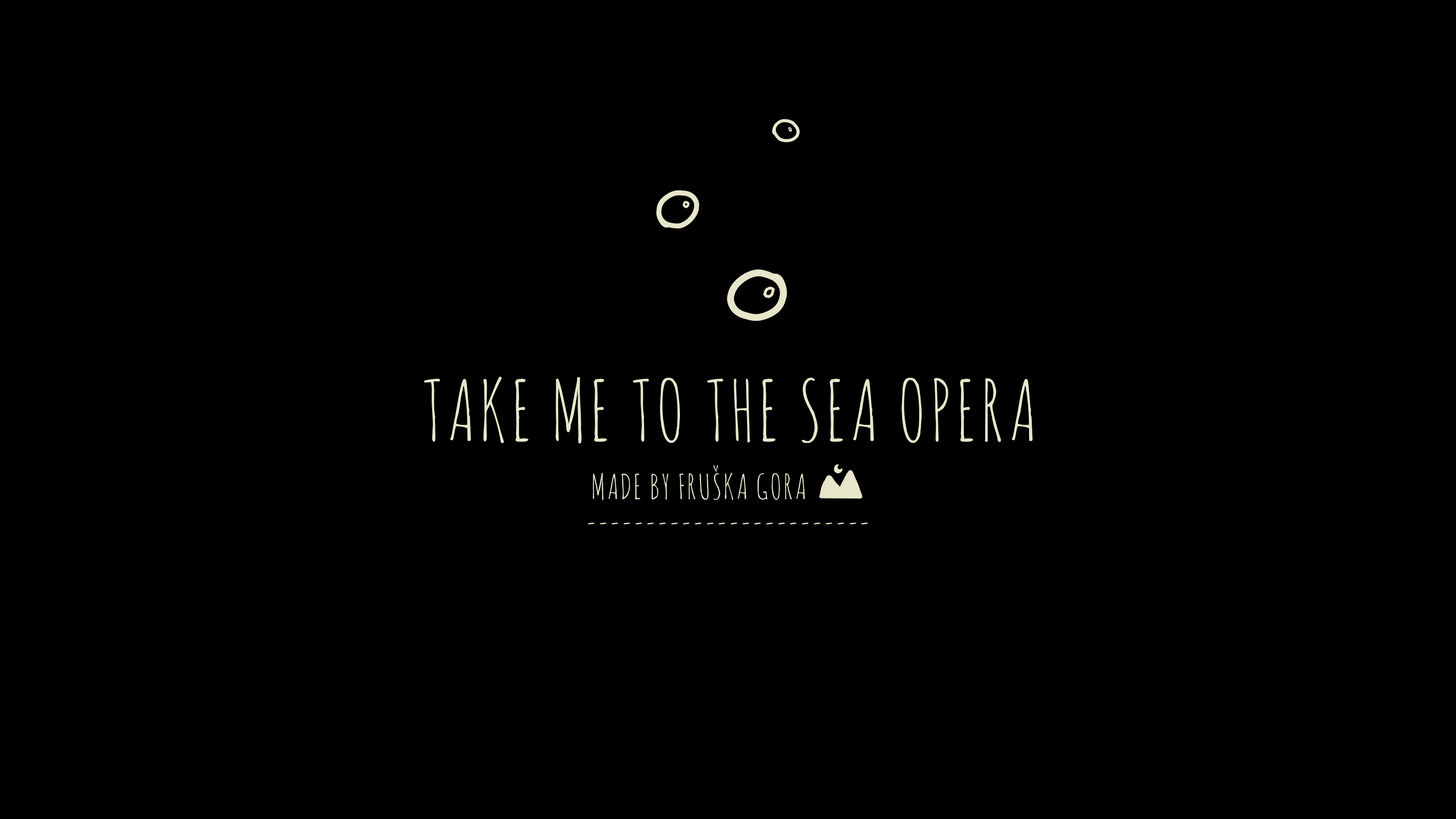
<style>
.page{position:relative;width:1456px;height:819px;background:#000000}
.page>*{position:absolute;margin:0}
.t1{font:82.7px "AmaticSC-Regular";letter-spacing:0.05em;color:#e7e6cb;text-transform:uppercase}
.t2{font:33.7px "AmaticSC-Regular";letter-spacing:0.05em;color:#e7e6cb;text-transform:uppercase}
</style>
<div class="page">
<p class="t1" style="left:424px;top:376px;width:609px;height:68px">TAKE ME TO THE SEA OPERA</p>
<p class="t2" style="left:593px;top:465px;width:212px;height:35px">made by fruška gora</p>
<p class="t2" style="left:588px;top:523px;width:280px;height:2px">------------------------</p>
</div>
